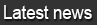
<style>
.page{position:relative;width:97px;height:25px;background:#333333}
.page>*{position:absolute;margin:0}
.t1{font:19.4px "ArialMT";color:#ffffff;scale:0.86 1}
</style>
<div class="page">
<p class="t1" style="left:4px;top:5px;width:88px;height:14px">Latest news</p>
</div>
